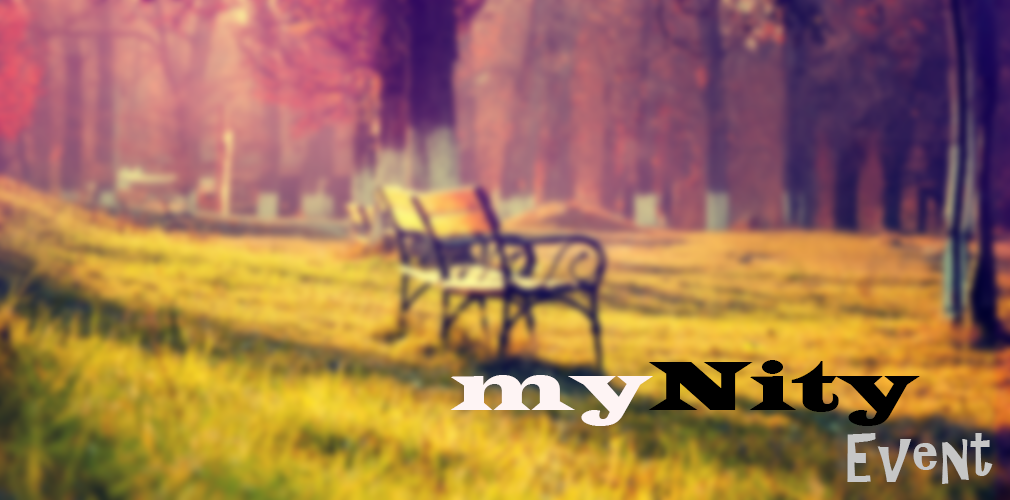
<style>
.page{position:relative;width:1010px;height:500px}
.page>*{position:absolute;margin:0}
.t1{font:60px "ARCHRISTY";color:#c6c6c6}
.t2{font:72px "LatinWide";color:#fef4f4}
.t3{font:72px "LatinWide";color:#000000}
</style>
<div class="page">
<p class="t1" style="left:450px;top:360px;width:543px;height:124px"><span class="t2">my</span><span class="t3">Nity<br>           </span>Event</p>
</div>
